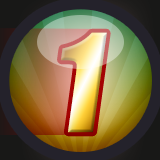
<style>
.page{position:relative;width:160px;height:160px}
.page>*{position:absolute;margin:0}
.t1{font:126.7px "Impact"}
</style>
<div class="page">
<p class="t1" style="left:61px;top:32px;width:46px;height:101px">1</p>
</div>
